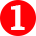
<style>
.page{position:relative;width:36px;height:36px;background:#ff0005}
.page>*{position:absolute;margin:0}
.t1{font:35px "RobotoSlab-Bold";color:#ffffff}
</style>
<div class="page">
<p class="t1" style="left:11px;top:5px;width:14px;height:25px">1</p>
</div>
